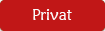
<style>
.page{position:relative;width:105px;height:31px;background:#c11717}
.page>*{position:absolute;margin:0}
.t1{font:16px "MaiandraGD-Regular";color:#fafbfa}
</style>
<div class="page">
<p class="t1" style="left:33px;top:9px;width:39px;height:11px">Privat</p>
</div>
